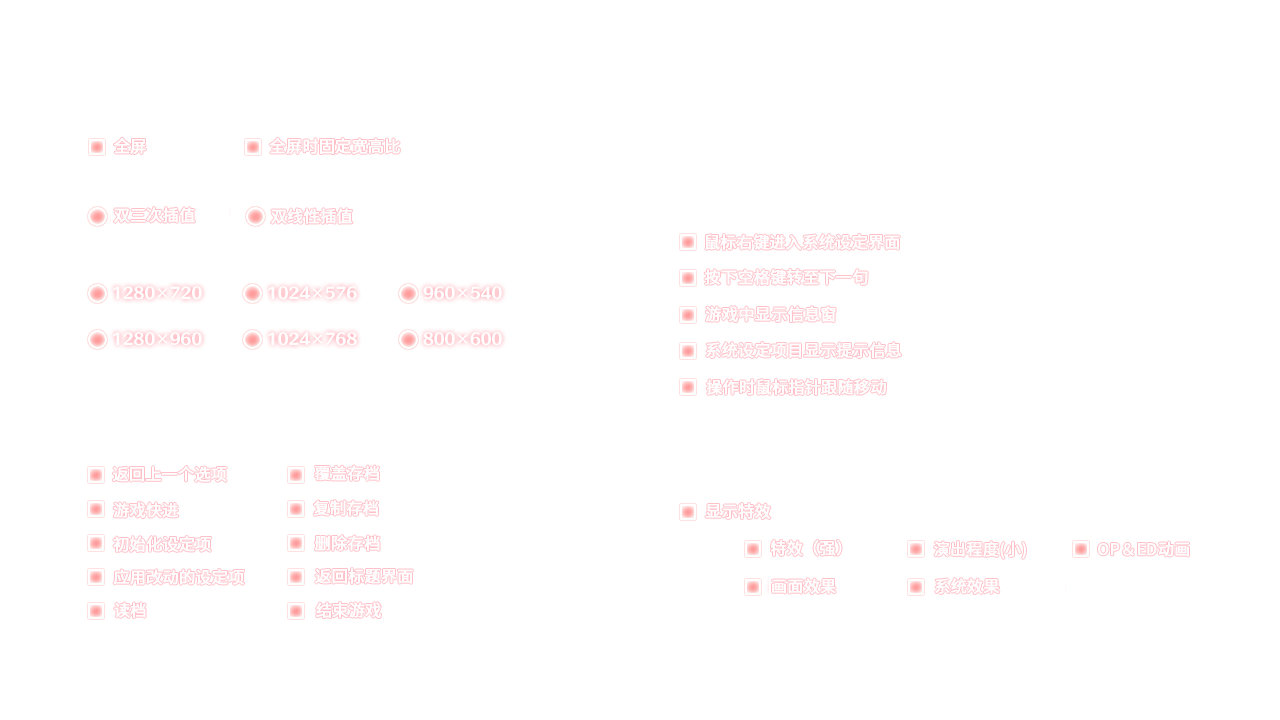
<style>
.page{position:relative;width:1280px;height:720px;background:#ffffff}
.page>*{position:absolute;margin:0}
.t1{font:16px "SourceHanSansSC-Regular";color:#fffefe;font-weight:bold}
</style>
<div class="page">
<p class="t1" style="left:114px;top:137px;width:32px;height:17px">全屏</p>
<p class="t1" style="left:269px;top:137px;width:131px;height:17px">全屏时固定宽高比</p>
<p class="t1" style="left:113px;top:207px;width:82px;height:16px">双三次插值</p>
<p class="t1" style="left:271px;top:208px;width:82px;height:16px">双线性插值</p>
<p class="t1" style="left:705px;top:234px;width:195px;height:16px">鼠标右键进入系统设定界面</p>
<p class="t1" style="left:704px;top:269px;width:164px;height:16px">按下空格键转至下一句</p>
<p class="t1" style="left:705px;top:306px;width:131px;height:16px">游戏中显示信息窗</p>
<p class="t1" style="left:706px;top:342px;width:196px;height:16px">系统设定项目显示提示信息</p>
<p class="t1" style="left:706px;top:379px;width:180px;height:16px">操作时鼠标指针跟随移动</p>
<p class="t1" style="left:112px;top:466px;width:115px;height:16px">返回上一个选项</p>
<p class="t1" style="left:314px;top:465px;width:65px;height:16px">覆盖存档</p>
<p class="t1" style="left:113px;top:502px;width:66px;height:16px">游戏快进</p>
<p class="t1" style="left:313px;top:500px;width:65px;height:16px">复制存档</p>
<p class="t1" style="left:705px;top:503px;width:66px;height:16px">显示特效</p>
<p class="t1" style="left:113px;top:536px;width:99px;height:16px">初始化设定项</p>
<p class="t1" style="left:314px;top:535px;width:66px;height:16px">删除存档</p>
<p class="t1" style="left:770px;top:540px;width:72px;height:16px">特效（强）</p>
<p class="t1" style="left:934px;top:541px;width:92px;height:18px">演出程度(小)</p>
<p class="t1" style="left:1098px;top:541px;width:91px;height:16px">OP＆ED动画</p>
<p class="t1" style="left:113px;top:569px;width:132px;height:16px">应用改动的设定项</p>
<p class="t1" style="left:315px;top:568px;width:98px;height:16px">返回标题界面</p>
<p class="t1" style="left:772px;top:578px;width:64px;height:16px">画面效果</p>
<p class="t1" style="left:935px;top:578px;width:65px;height:16px">系统效果</p>
<p class="t1" style="left:114px;top:602px;width:32px;height:16px">读档</p>
<p class="t1" style="left:316px;top:602px;width:65px;height:16px">结束游戏</p>
</div>
